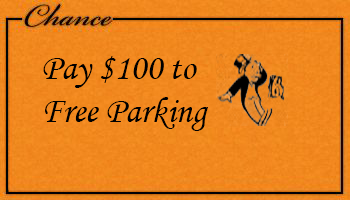
<style>
.page{position:relative;width:350px;height:200px}
.page>*{position:absolute;margin:0}
.t1{font:36px "MonotypeCorsiva";color:#000000}
</style>
<div class="page">
<p class="t1" style="left:43px;top:56px;width:165px;height:75px">Pay $100 to Free Parking</p>
</div>
